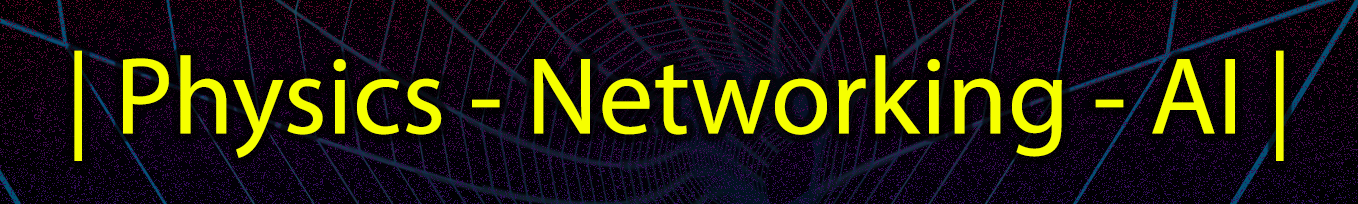
<style>
.page{position:relative;width:1358px;height:204px}
.page>*{position:absolute;margin:0}
.t1{font:110px "MyriadPro-Regular";color:#f6ff00}
</style>
<div class="page">
<p class="t1" style="left:74px;top:50px;width:1210px;height:111px">| Physics - Networking - AI |</p>
</div>
